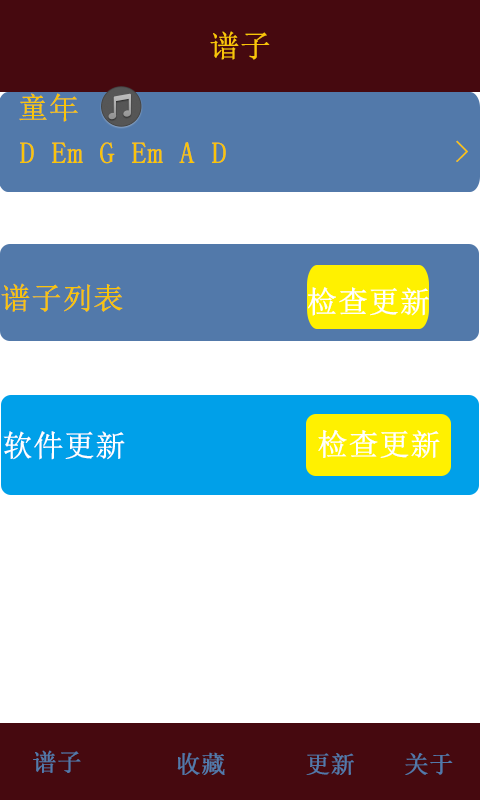
<style>
.page{position:relative;width:480px;height:800px;background:#ffffff}
.page>*{position:absolute;margin:0}
.t1{font:30px "SimSun";color:#fac409;font-weight:bold}
.t2{font:30px "SimSun";color:#ffffff;font-weight:bold}
.t3{font:24px "SimSun";color:#5279aa;font-weight:bold}
</style>
<div class="page">
<p class="t1" style="left:210px;top:31px;width:60px;height:29px">谱子</p>
<p class="t1" style="left:19px;top:93px;width:59px;height:29px">童年</p>
<p class="t1" style="left:20px;top:142px;width:206px;height:22px">D Em G Em A D</p>
<p class="t1" style="left:456px;top:140px;width:12px;height:22px">&gt;</p>
<p class="t1" style="left:1px;top:283px;width:122px;height:29px">谱子列表</p>
<p class="t2" style="left:308px;top:287px;width:121px;height:29px">检查更新</p>
<p class="t2" style="left:3px;top:431px;width:122px;height:29px">软件更新</p>
<p class="t2" style="left:318px;top:430px;width:122px;height:28px">检查更新</p>
<p class="t3" style="left:33px;top:750px;width:48px;height:23px">谱子</p>
<p class="t3" style="left:177px;top:752px;width:48px;height:23px">收藏</p>
<p class="t3" style="left:306px;top:753px;width:48px;height:22px">更新</p>
<p class="t3" style="left:405px;top:753px;width:48px;height:22px">关于</p>
</div>
